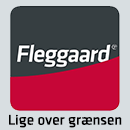
<style>
.page{position:relative;width:130px;height:130px;background:#d8dee1}
.page>*{position:absolute;margin:0}
.t1{font:14px "ClioRegular";color:#000000;font-weight:bold}
</style>
<div class="page">
<p class="t1" style="left:9px;top:114px;width:113px;height:14px">Lige over grænsen</p>
</div>
